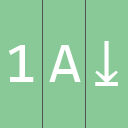
<style>
.page{position:relative;width:128px;height:128px;background:#89c997}
.page>*{position:absolute;margin:0}
.t1{font:58.3px "Consolas";letter-spacing:0.2em;color:#ffffff}
.t2{font:58.3px "CambriaMath";letter-spacing:0.2em;color:#ffffff}
</style>
<div class="page">
<p class="t1" style="left:8px;top:41px;width:110px;height:45px">1A<span class="t2">⤓</span></p>
</div>
